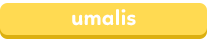
<style>
.page{position:relative;width:207px;height:40px;background:#ffda52}
.page>*{position:absolute;margin:0}
.t1{font:22px "Linotte-Bold";color:#ffffff}
</style>
<div class="page">
<p class="t1" style="left:72px;top:9px;width:64px;height:17px">umalis</p>
</div>
